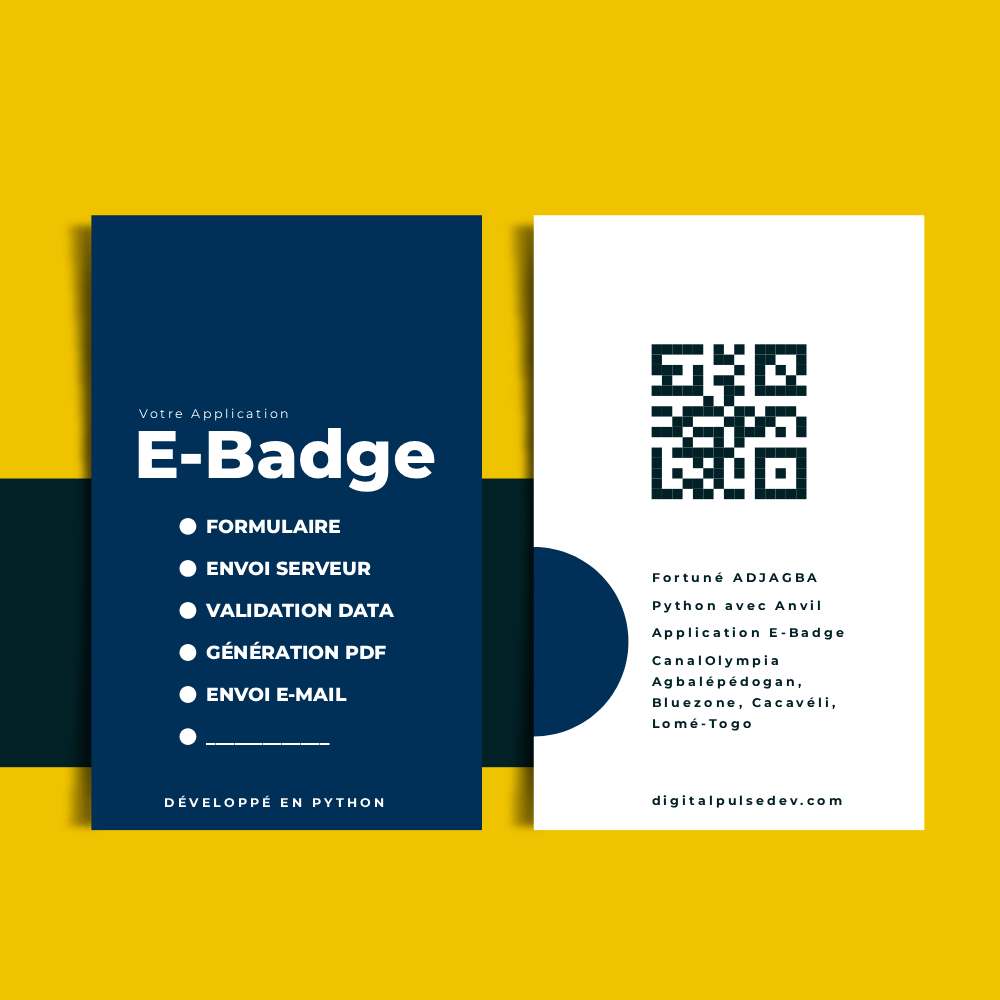
<style>
.page{position:relative;width:1000px;height:1000px;background:#f0c300}
.page>*{position:absolute;margin:0}
.t1{font:12.6px "Montserrat-Regular";letter-spacing:0.2em;color:#fcfdfd}
.t2{font:67.3px "Montserrat-ExtraBold";color:#ffffff}
.t3{font:18.9px "Montserrat-ExtraBold";color:#ffffff}
.t4{font:12.6px "Montserrat-Bold";letter-spacing:0.25em;color:#012126}
.t5{font:12.6px/21px "Montserrat-Bold";letter-spacing:0.25em;color:#012126}
.t6{font:12.6px "Montserrat-Bold";letter-spacing:0.25em;color:#ffffff}
</style>
<div class="page">
<p class="t1" style="left:139px;top:408px;width:149px;height:13px">Votre Application</p>
<p class="t2" style="left:138px;top:428px;width:297px;height:64px">E-Badge</p>
<p class="t3" style="left:207px;top:519px;width:133px;height:15px">FORMULAIRE</p>
<p class="t3" style="left:207px;top:561px;width:164px;height:15px">ENVOI SERVEUR</p>
<p class="t4" style="left:653px;top:572px;width:164px;height:11px">Fortuné ADJAGBA</p>
<p class="t3" style="left:205px;top:603px;width:190px;height:15px">VALIDATION DATA</p>
<p class="t4" style="left:653px;top:600px;width:167px;height:13px">Python avec Anvil</p>
<p class="t4" style="left:651px;top:627px;width:193px;height:13px">Application E-Badge</p>
<p class="t3" style="left:206px;top:641px;width:180px;height:19px">GÉNÉRATION PDF</p>
<p class="t5" style="left:651px;top:655px;width:184px;height:76px">CanalOlympia<br>Agbalépédogan,<br>Bluezone, Cacavéli,<br>Lomé-Togo</p>
<p class="t3" style="left:207px;top:687px;width:140px;height:15px">ENVOI E-MAIL</p>
<p class="t3" style="left:206px;top:743px;width:124px;height:2px">_____________</p>
<p class="t6" style="left:165px;top:795px;width:219px;height:13px">DÉVELOPPÉ EN PYTHON</p>
<p class="t4" style="left:652px;top:795px;width:190px;height:13px">digitalpulsedev.com</p>
</div>
